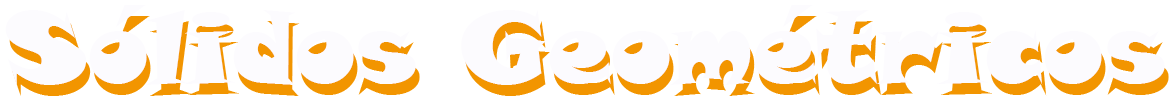
<style>
.page{position:relative;width:1172px;height:103px;background:#ffffff}
.page>*{position:absolute;margin:0}
.t1{font:100px "SnapITC-Regular"}
</style>
<div class="page">
<p class="t1" style="left:9px;top:16px;width:1160px;height:80px">Sólidos Geométricos</p>
</div>
